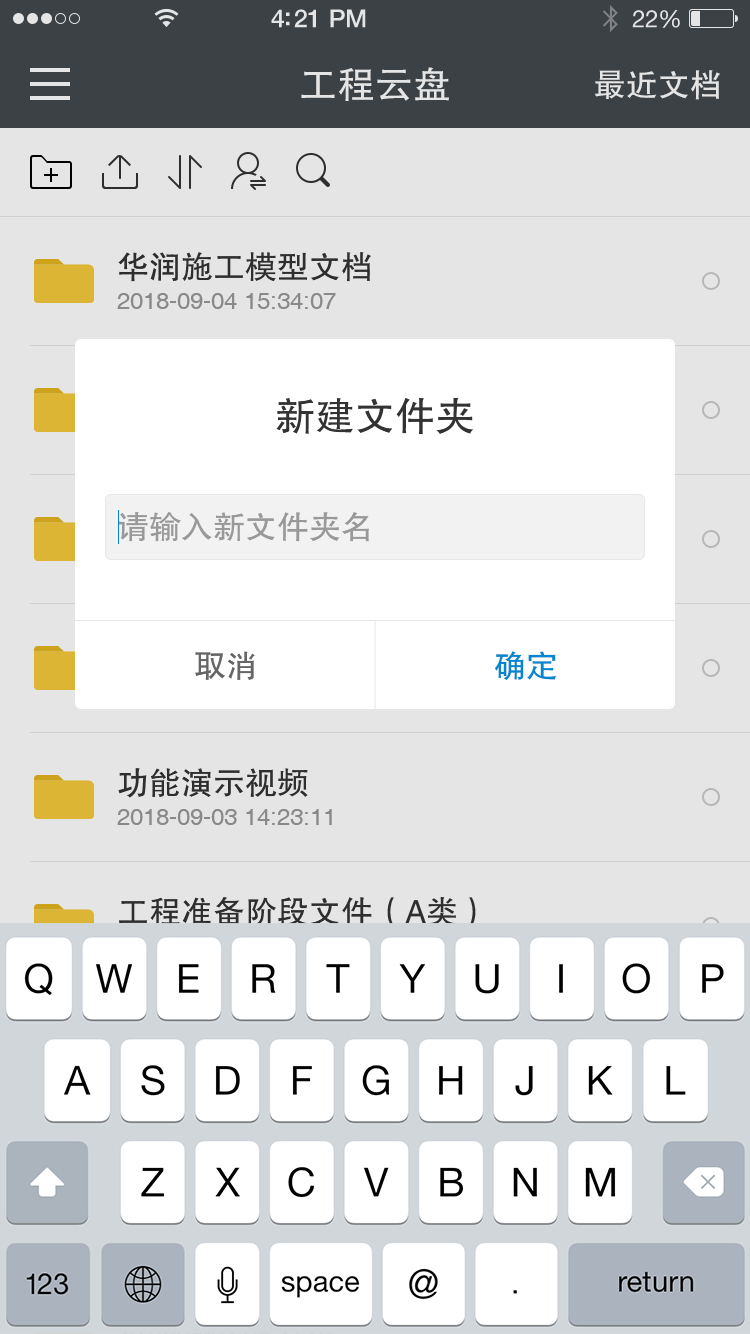
<style>
.page{position:relative;width:750px;height:1334px;background:#e5e5e5}
.page>*{position:absolute;margin:0}
.t1{font:38px "FZHTJW--GB1-0";color:#e5e5e5}
.t2{font:32px "FZHTJW--GB1-0";color:#e5e5e5}
.t3{font:32px "FZHTJW--GB1-0";color:#333333}
.t4{font:24px "Helvetica";color:#999999}
.t5{font:40px "FZHTJW--GB1-0";color:#333333}
.t6{font:32px "FZHTJW--GB1-0";color:#999999}
.t7{font:32px "FZHTJW--GB1-0";color:#666666}
.t8{font:32px "FZHTJW--GB1-0";color:#0487d0}
</style>
<div class="page">
<p class="t1" style="left:301px;top:67px;width:148px;height:34px">工程云盘</p>
<p class="t2" style="left:595px;top:70px;width:125px;height:30px">最近文档</p>
<p class="t3" style="left:118px;top:252px;width:253px;height:30px">华润施工模型文档</p>
<p class="t4" style="left:117px;top:293px;width:219px;height:16px">2018-09-04 15:34:07</p>
<p class="t5" style="left:276px;top:397px;width:198px;height:37px">新建文件夹</p>
<p class="t6" style="left:118px;top:512px;width:251px;height:30px">请输入新文件夹名</p>
<p class="t7" style="left:195px;top:651px;width:60px;height:29px">取消</p>
<p class="t8" style="left:495px;top:651px;width:62px;height:29px">确定</p>
<p class="t3" style="left:118px;top:768px;width:190px;height:30px">功能演示视频</p>
<p class="t4" style="left:117px;top:809px;width:215px;height:16px">2018-09-03 14:23:11</p>
<p class="t3" style="left:119px;top:897px;width:357px;height:30px">工程准备阶段文件（A类）</p>
</div>
